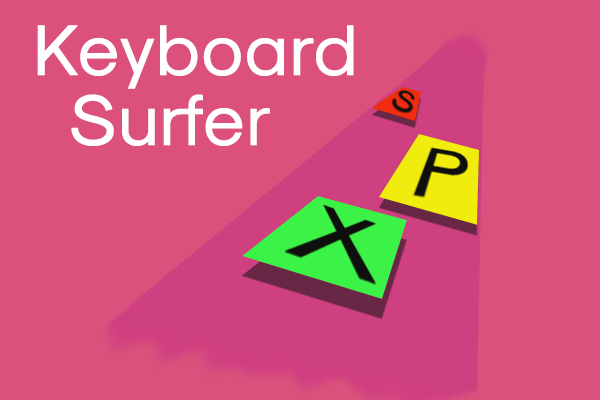
<style>
.page{position:relative;width:600px;height:400px;background:#dc517b}
.page>*{position:absolute;margin:0}
.t1{font:72px/70px "Sk-Modernist-Regular";color:#ffffff;font-weight:bold}
</style>
<div class="page">
<p class="t1" style="left:37px;top:25px;width:317px;height:121px">Keyboard<br> Surfer</p>
</div>
